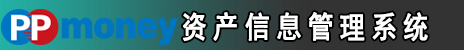
<style>
.page{position:relative;width:464px;height:50px;background:#333333}
.page>*{position:absolute;margin:0}
.t1{font:30px "SimHei";letter-spacing:0.24em;color:#ffffff;font-weight:bold;scale:0.83 1}
</style>
<div class="page">
<p class="t1" style="left:183px;top:12px;width:245px;height:30px">资产信息管理系统</p>
</div>
